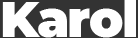
<style>
.page{position:relative;width:138px;height:38px;background:#ffffff}
.page>*{position:absolute;margin:0}
.t1{font:50.8px "Montserrat-Black";letter-spacing:-0.03em;color:#ffffff}
</style>
<div class="page">
<p class="t1" style="left:2px;top:0px;width:134px;height:38px">Karol</p>
</div>
